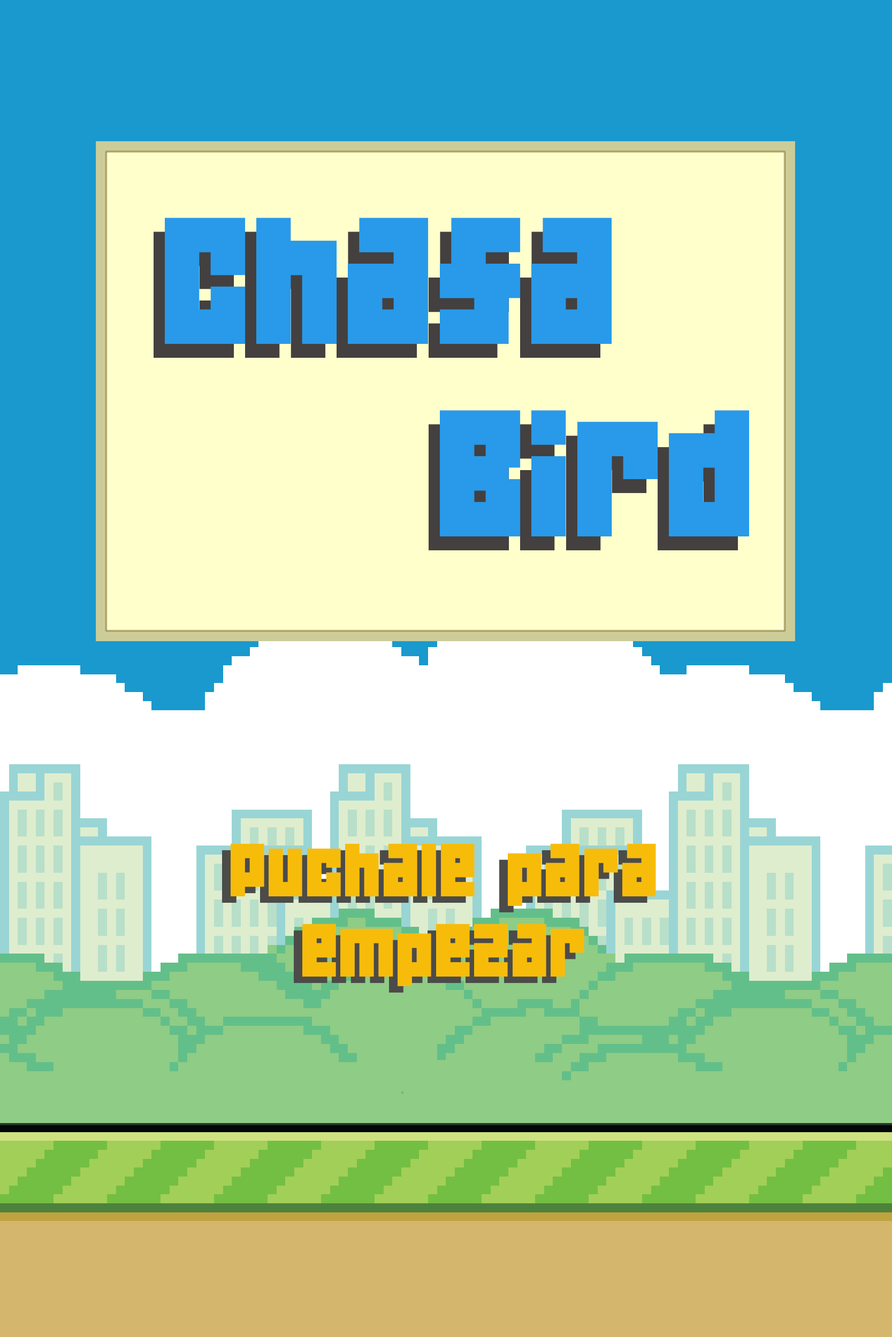
<style>
.page{position:relative;width:892px;height:1337px;background:#1999ce}
.page>*{position:absolute;margin:0}
.t1{font:160.5px "04b19";color:#289ae9}
.t2{font:160.5px "04b19"}
.t3{font:66.9px "04b19";color:#f7bc09}
.t4{font:66.9px "04b19"}
</style>
<div class="page">
<p class="t1" style="left:165px;top:218px;width:584px;height:319px">Chafa<br>    Bird</p>
<p class="t2" style="left:154px;top:232px;width:584px;height:318px">Chafa<br>    Bird</p>
<p class="t3" style="left:231px;top:844px;width:425px;height:142px;text-align:center">Puchale para<br>empezar</p>
<p class="t4" style="left:222px;top:850px;width:425px;height:143px;text-align:center">Puchale para<br>empezar</p>
</div>
